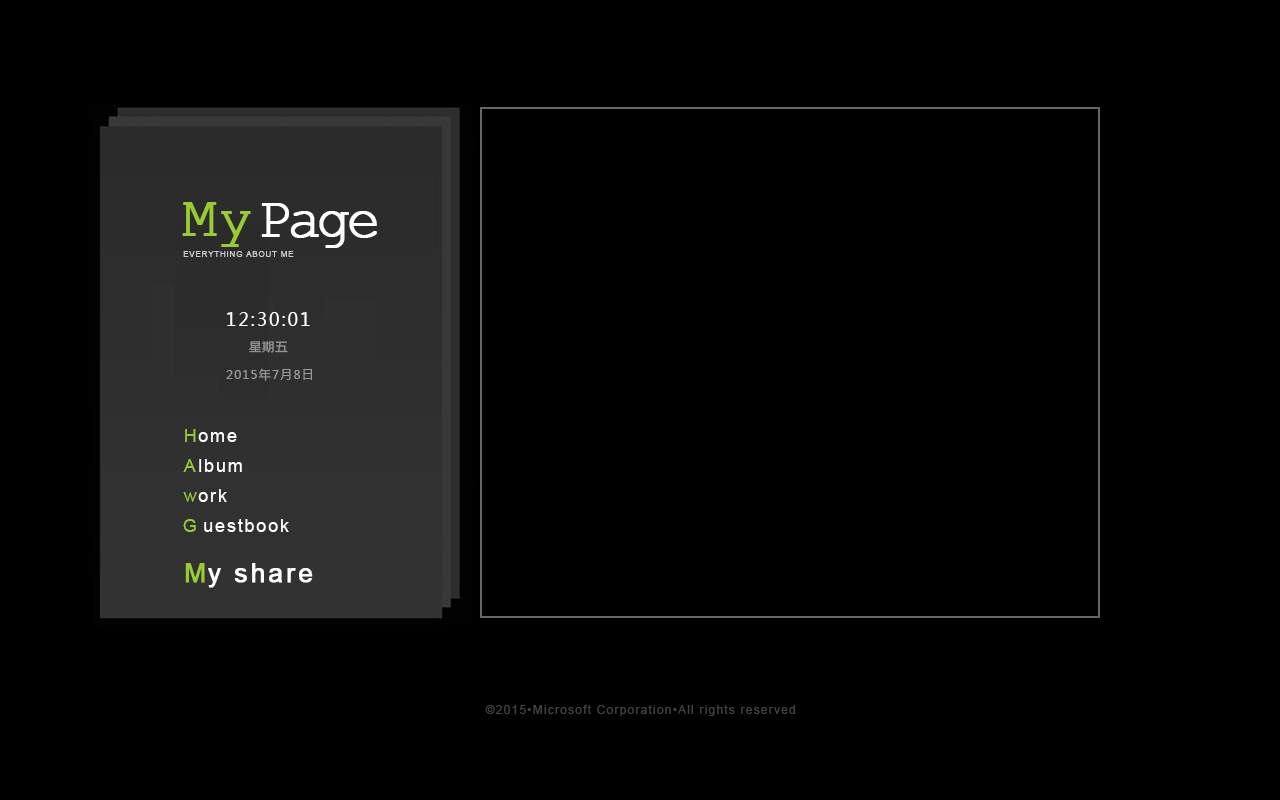
<style>
.page{position:relative;width:1280px;height:800px;background:#000000}
.page>*{position:absolute;margin:0}
.t1{font:56px "CourierNewPSMT";color:#99cc33;font-weight:bold}
.t2{font:56px "CourierNewPSMT";letter-spacing:-0.1em;color:#ffffff;font-weight:bold}
.t3{font:8px "ArialMT";letter-spacing:0.1em;color:#cccccc}
.t4{font:18px "MicrosoftYaHei";letter-spacing:0.1em;color:#ffffff}
.t5{font:12px "MicrosoftYaHei";letter-spacing:0.1em;color:#999999}
.t6{font:18px "ArialMT";letter-spacing:0.1em;color:#99cc33}
.t7{font:18px "ArialMT";letter-spacing:0.1em;color:#ffffff}
.t8{font:26px "ArialMT";letter-spacing:0.1em;color:#99cc33;font-weight:bold}
.t9{font:26px "ArialMT";letter-spacing:0.1em;color:#ffffff;font-weight:bold}
.t10{font:12px "ArialMT";letter-spacing:0.1em;color:#424242}
</style>
<div class="page">
<p class="t1" style="left:182px;top:202px;width:69px;height:45px">My</p>
<p class="t2" style="left:261px;top:203px;width:116px;height:45px">Page</p>
<p class="t3" style="left:183px;top:251px;width:111px;height:6px">EVERYTHING ABOUT ME</p>
<p class="t4" style="left:227px;top:312px;width:83px;height:14px">12:30:01</p>
<p class="t5" style="left:249px;top:341px;width:39px;height:12px">星期五</p>
<p class="t5" style="left:226px;top:368px;width:86px;height:13px">2015年7月8日</p>
<p class="t6" style="left:185px;top:429px;width:11px;height:13px">H</p>
<p class="t7" style="left:198px;top:432px;width:39px;height:10px">ome</p>
<p class="t6" style="left:183px;top:459px;width:13px;height:13px">A</p>
<p class="t7" style="left:199px;top:459px;width:43px;height:13px">lbum</p>
<p class="t6" style="left:183px;top:492px;width:14px;height:10px">w</p>
<p class="t7" style="left:198px;top:489px;width:29px;height:13px">ork</p>
<p class="t6" style="left:183px;top:519px;width:13px;height:13px">G</p>
<p class="t7" style="left:204px;top:519px;width:85px;height:13px">uestbook</p>
<p class="t8" style="left:185px;top:563px;width:20px;height:20px">M</p>
<p class="t9" style="left:208px;top:563px;width:105px;height:25px">y share</p>
<p class="t10" style="left:485px;top:705px;width:310px;height:11px">©2015•Microsoft Corporation•All rights reserved</p>
</div>
